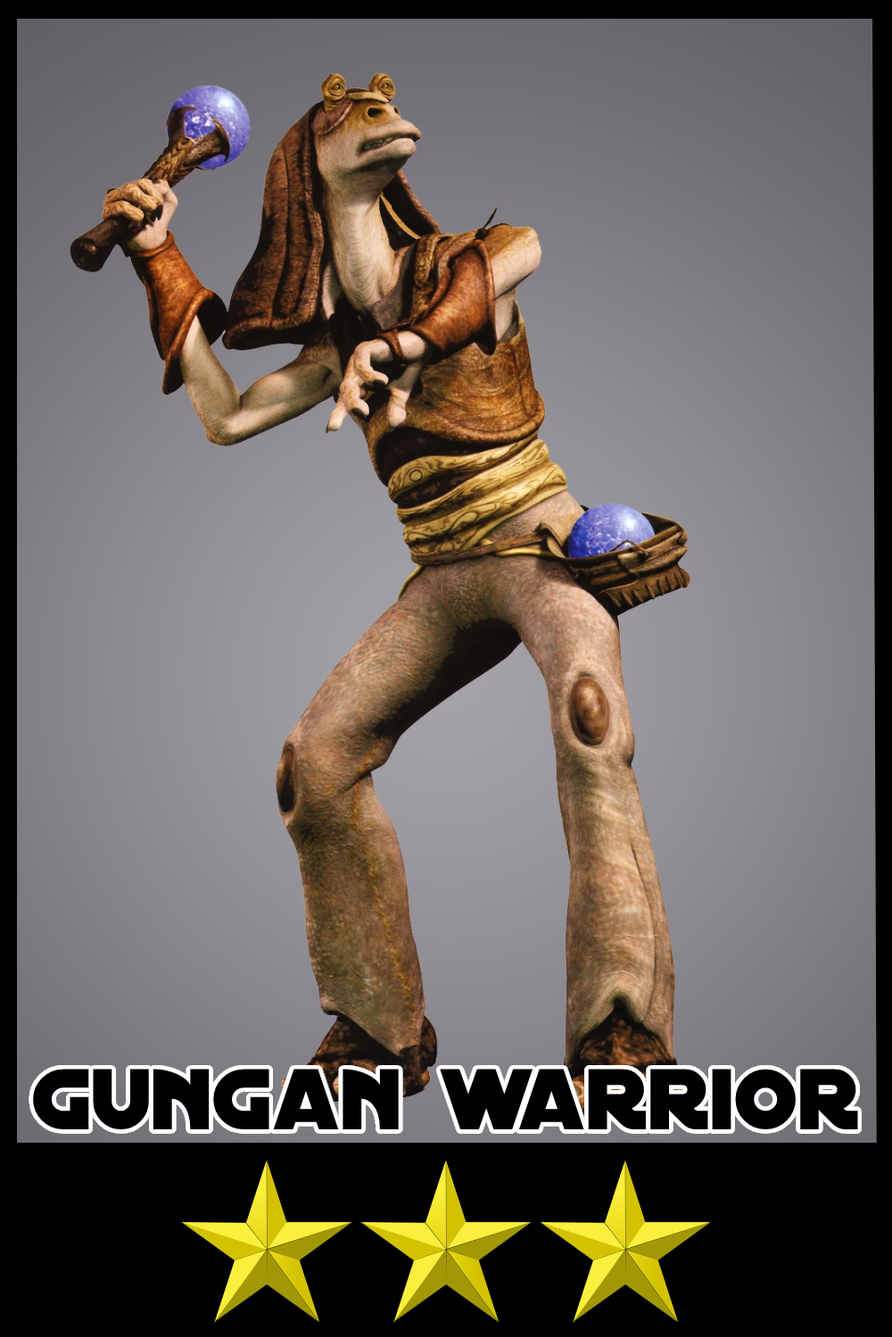
<style>
.page{position:relative;width:892px;height:1337px}
.page>*{position:absolute;margin:0}
.t1{font:92.4px "DistantGalaxy";color:#000000}
</style>
<div class="page">
<p class="t1" style="left:33px;top:1069px;width:825px;height:61px">gungan warrior</p>
</div>
